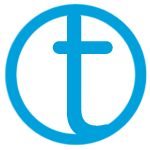
<style>
.page{position:relative;width:150px;height:150px;background:#ffffff}
.page>*{position:absolute;margin:0}
.t1{font:185.2px "GothamRounded-Book";color:#00a0dc}
</style>
<div class="page">
<p class="t1" style="left:52px;top:11px;width:61px;height:128px">t</p>
</div>
